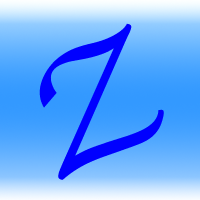
<style>
.page{position:relative;width:200px;height:200px}
.page>*{position:absolute;margin:0}
.t1{font:163.4px "Apple-Chancery";color:#0000ff;scale:1.38 1}
</style>
<div class="page">
<p class="t1" style="left:39px;top:23px;width:125px;height:157px;rotate:-25deg">Z</p>
</div>
